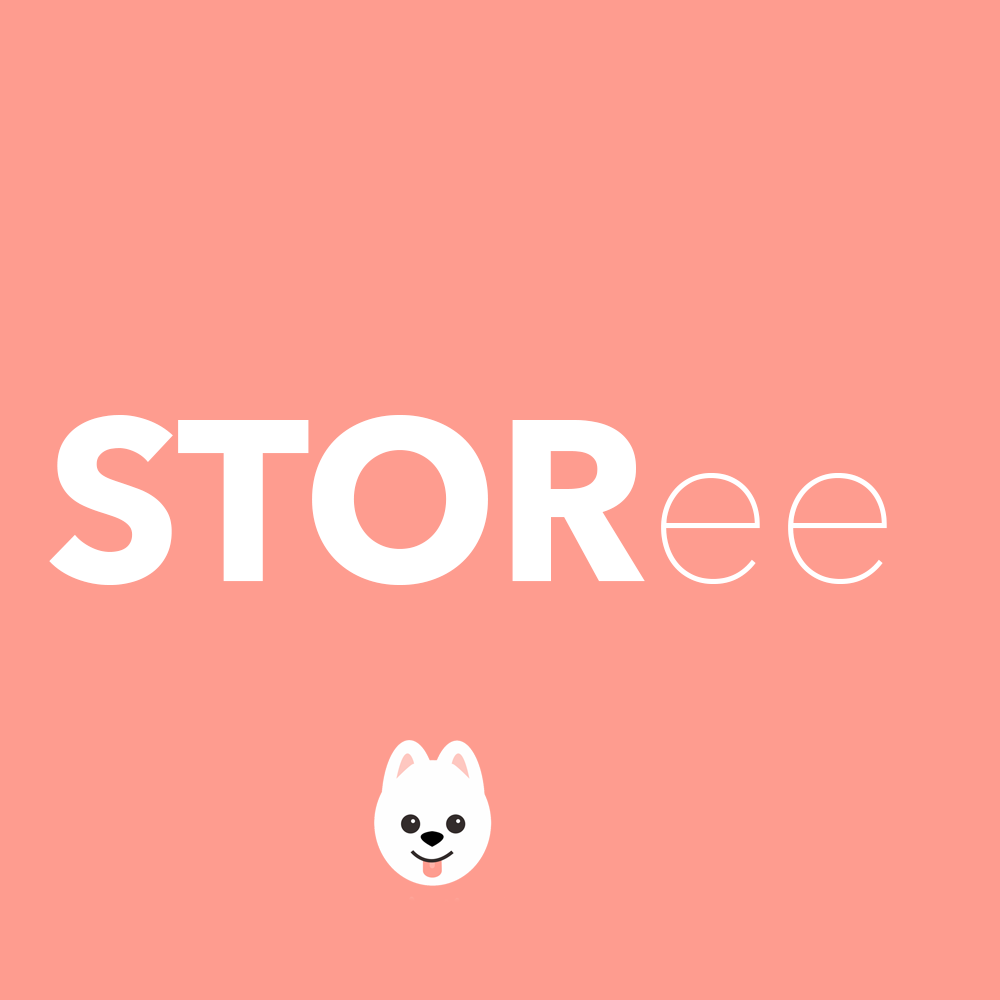
<style>
.page{position:relative;width:1000px;height:1000px;background:#fe9c8f}
.page>*{position:absolute;margin:0}
.t1{font:227.5px "AvenirNext-Bold";color:#ffffff}
.t2{font:227.5px "AvenirNext-UltraLight";color:#ffffff}
</style>
<div class="page">
<p class="t1" style="left:49px;top:415px;width:838px;height:170px">STOR<span class="t2">ee</span></p>
</div>
